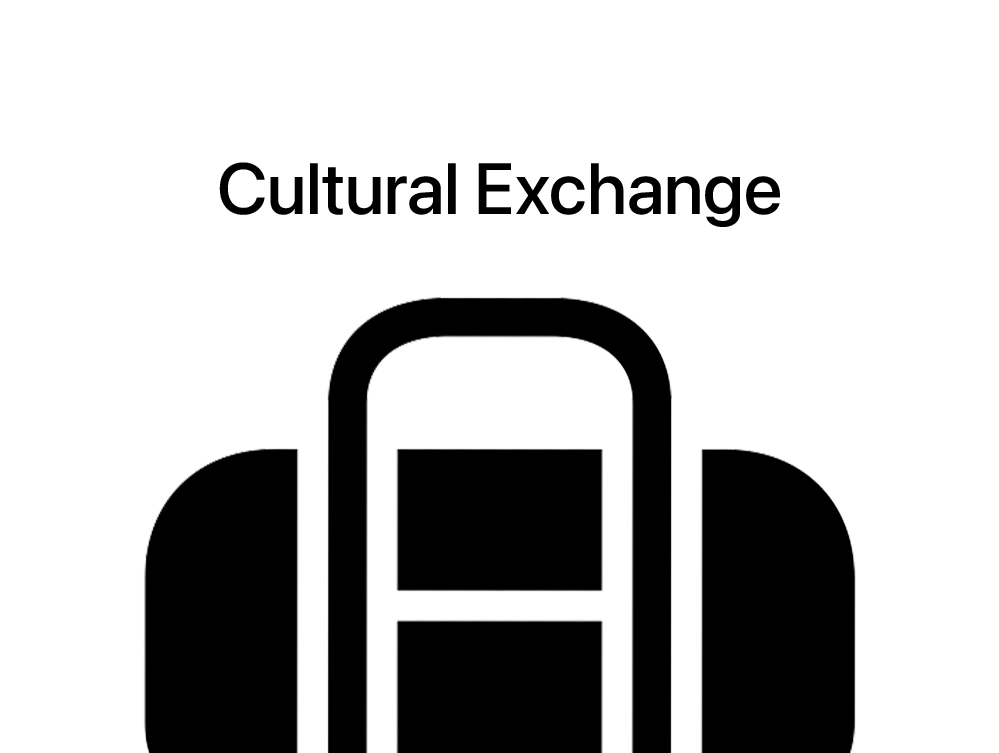
<style>
.page{position:relative;width:999px;height:753px;background:#ffffff}
.page>*{position:absolute;margin:0}
.t1{font:72px "SFPro-Medium";color:#000000}
</style>
<div class="page">
<p class="t1" style="left:219px;top:162px;width:561px;height:65px">Cultural Exchange</p>
</div>
